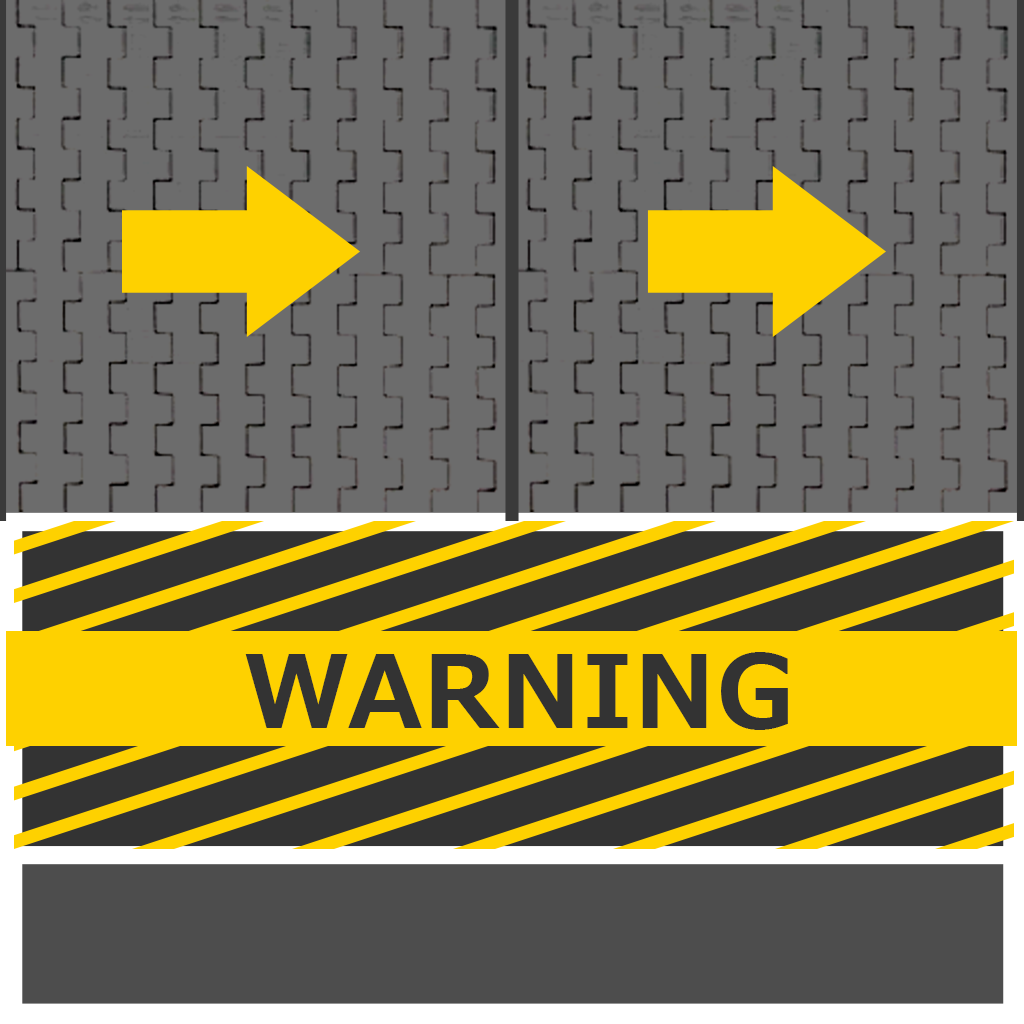
<style>
.page{position:relative;width:1024px;height:1024px;background:#6c6c6c}
.page>*{position:absolute;margin:0}
.t1{font:100px "Meiryo-Bold";letter-spacing:0.015em;color:#333333}
</style>
<div class="page">
<p class="t1" style="left:245px;top:652px;width:543px;height:78px">WARNING</p>
</div>
